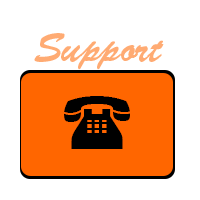
<style>
.page{position:relative;width:200px;height:200px;background:#ffffff}
.page>*{position:absolute;margin:0}
.t1{font:40px "BrushScriptStd";color:#ffab73}
</style>
<div class="page">
<p class="t1" style="left:34px;top:33px;width:130px;height:37px">Support</p>
</div>
